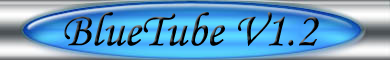
<style>
.page{position:relative;width:390px;height:60px}
.page>*{position:absolute;margin:0}
.t1{font:48px "MonotypeCorsiva";color:#000000}
</style>
<div class="page">
<p class="t1" style="left:64px;top:11px;width:255px;height:35px">BlueTube V1.2</p>
</div>
